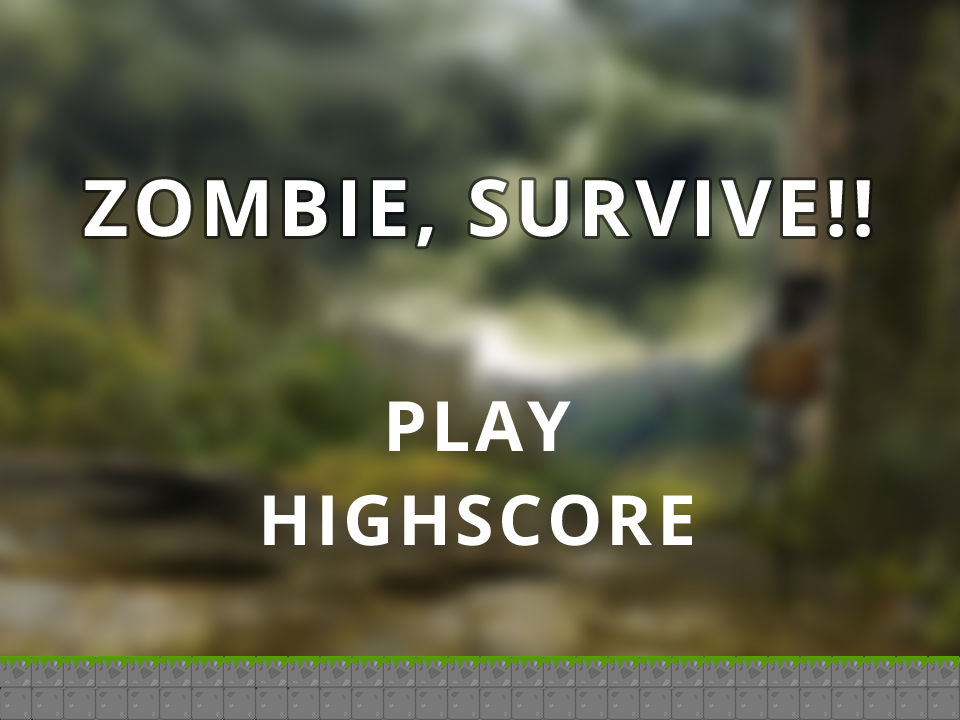
<style>
.page{position:relative;width:960px;height:720px}
.page>*{position:absolute;margin:0}
.t1{font:69.6px "OpenSans-Bold";letter-spacing:0.06em;color:#ffffff}
</style>
<div class="page">
<p class="t1" style="left:389px;top:401px;width:182px;height:50px">PLAY</p>
<p class="t1" style="left:264px;top:494px;width:428px;height:52px">HIGHSCORE</p>
</div>
